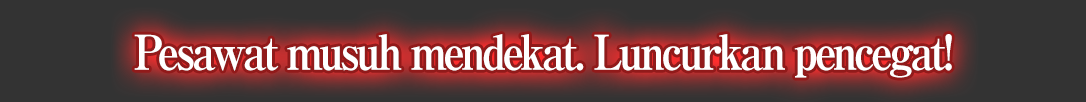
<style>
.page{position:relative;width:1086px;height:102px;background:#333333}
.page>*{position:absolute;margin:0}
.t1{font:48px "RyuminPro-ExBold";letter-spacing:-0.08em;color:#ffffff;scale:0.9 1}
</style>
<div class="page">
<p class="t1" style="left:134px;top:34px;width:818px;height:44px">Pesawat musuh mendekat. Luncurkan pencegat!</p>
</div>
